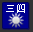
<style>
.page{position:relative;width:33px;height:32px;background:#000090}
.page>*{position:absolute;margin:0}
.t1{font:10.4px "SimSun";color:#ffffff}
</style>
<div class="page">
<p class="t1" style="left:6px;top:4px;width:19px;height:9px">三四</p>
</div>
